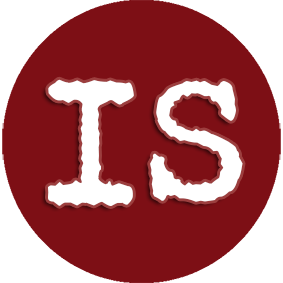
<style>
.page{position:relative;width:283px;height:283px;background:#7d0f15}
.page>*{position:absolute;margin:0}
.t1{font:175px "Bohemian-typewriter";color:#ffffff}
</style>
<div class="page">
<p class="t1" style="left:48px;top:79px;width:195px;height:127px">IS</p>
</div>
